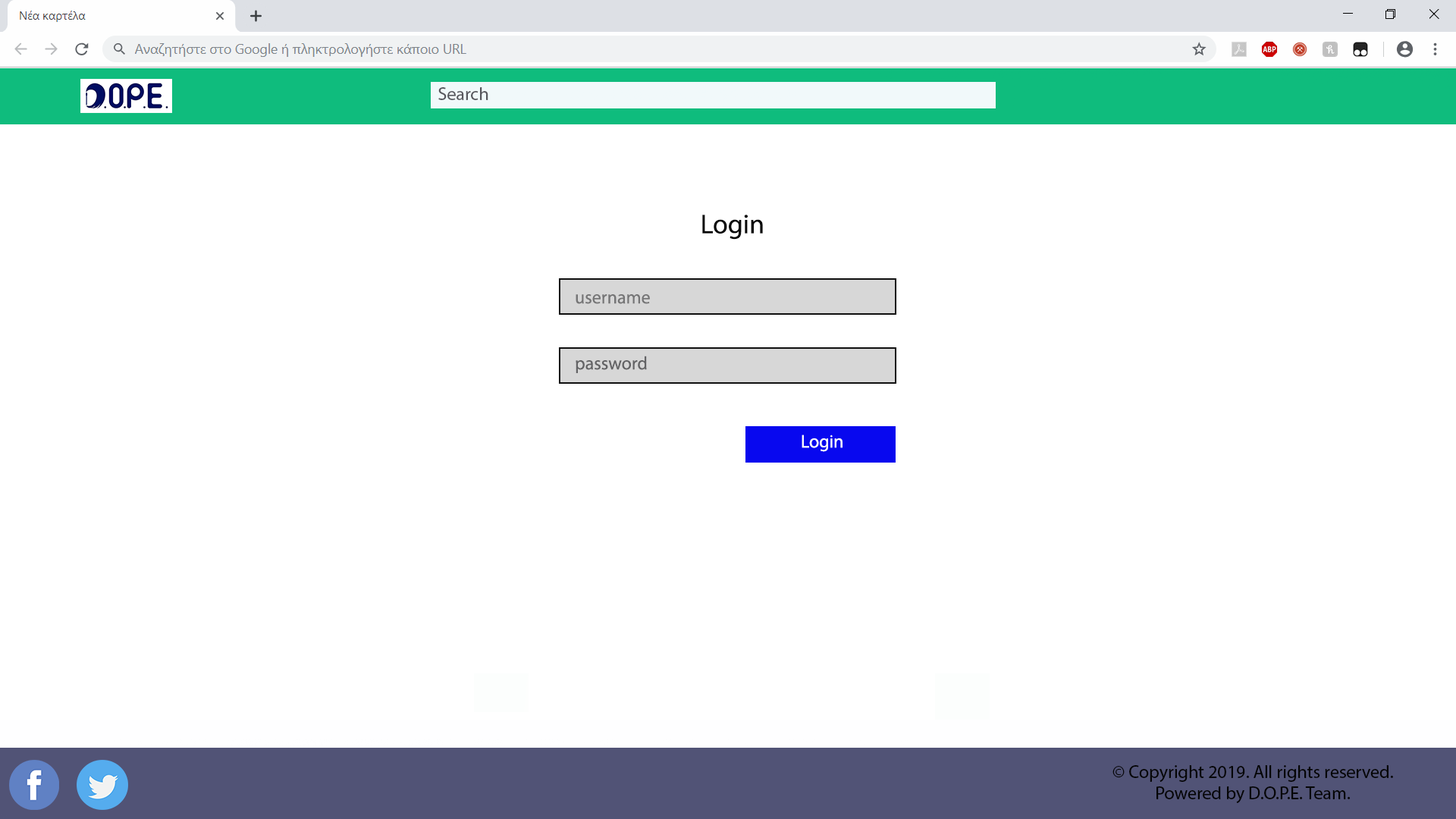
<style>
.page{position:relative;width:1456px;height:819px;background:#ffffff}
.page>*{position:absolute;margin:0}
.t1{font:18.2px "MyriadPro-Regular";color:#57575d}
.t2{font:27.3px "MyriadPro-Regular";color:#070707}
.t3{font:18.2px "MyriadPro-Regular";color:#757576}
.t4{font:18.2px "MyriadPro-Regular";color:#636365}
.t5{font:18.2px "MyriadPro-Regular";color:#fcfcfd}
.t6{font:18.2px "MyriadPro-Regular";color:#050505}
</style>
<div class="page">
<p class="t1" style="left:438px;top:87px;width:50px;height:13px">Search</p>
<p class="t2" style="left:702px;top:215px;width:61px;height:25px">Login</p>
<p class="t3" style="left:576px;top:294px;width:74px;height:10px">username</p>
<p class="t4" style="left:576px;top:356px;width:71px;height:17px">password</p>
<p class="t5" style="left:802px;top:435px;width:40px;height:17px">Login</p>
<p class="t6" style="left:1112px;top:765px;width:281px;height:38px;text-align:center">© Copyright 2019. All rights reserved. Powered by D.O.P.E. Team.</p>
</div>
